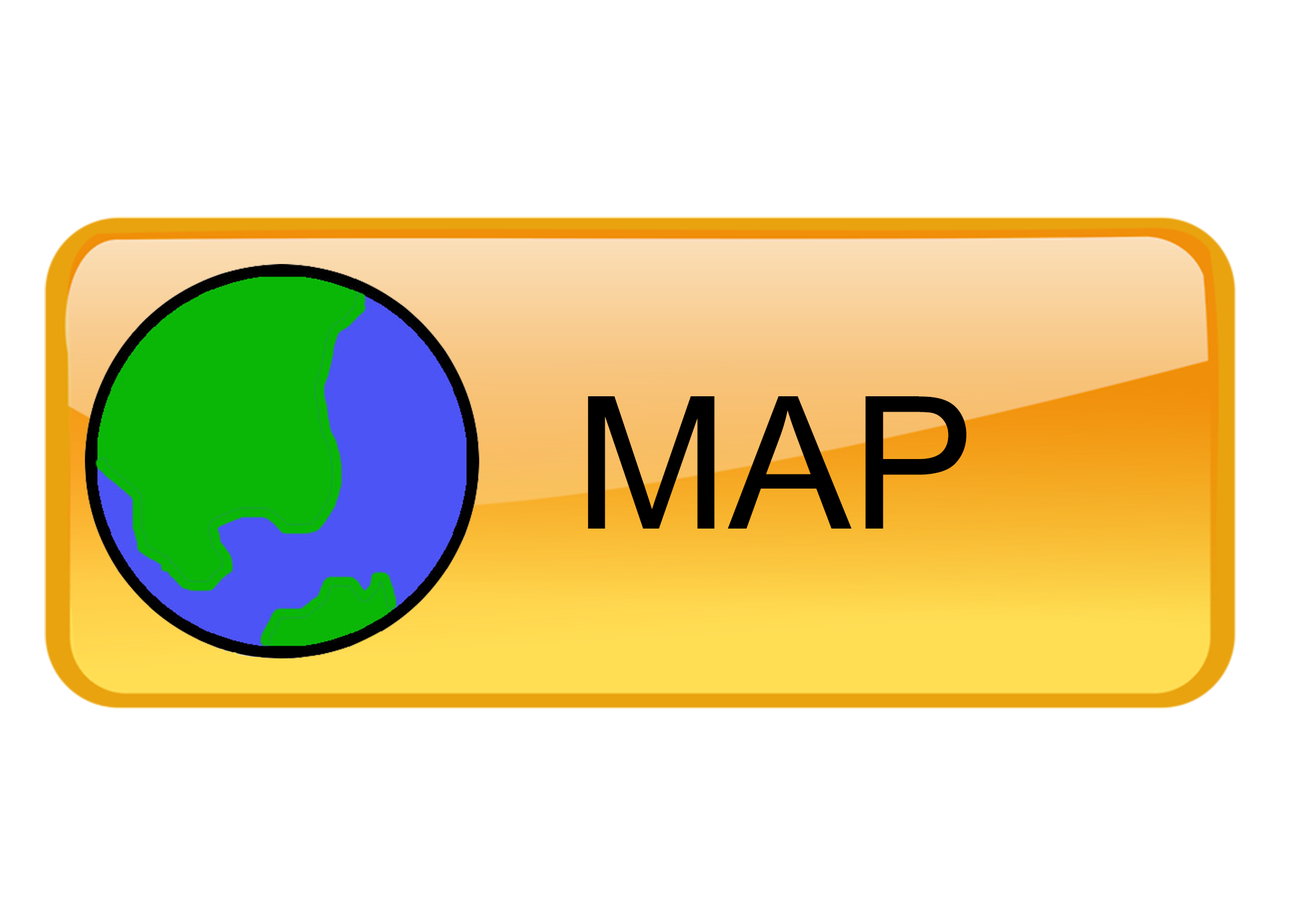
<style>
.page{position:relative;width:1292px;height:923px;background:#ffffff}
.page>*{position:absolute;margin:0}
.t1{font:184.6px "ArialMT";color:#000000}
</style>
<div class="page">
<p class="t1" style="left:588px;top:396px;width:379px;height:133px">MAP</p>
</div>
